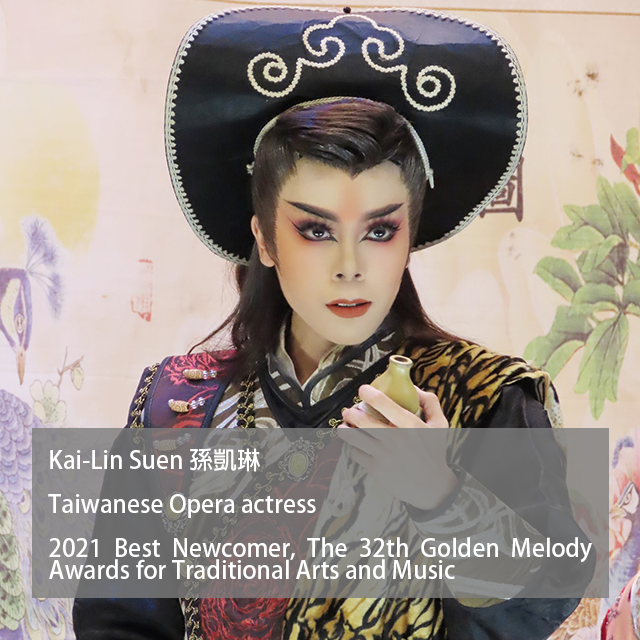
<style>
.page{position:relative;width:640px;height:640px}
.page>*{position:absolute;margin:0}
.t1{font:24px/22px "AdobeFanHeitiStd-Bold";color:#ffffff}
</style>
<div class="page">
<p class="t1" style="left:48px;top:448px;width:544px;height:131px;text-align:justify">Kai-Lin Suen 孫凱琳<br><br>Taiwanese Opera actress<br><br>2021 Best Newcomer, The 32th Golden Melody Awards for Traditional Arts and Music</p>
</div>
